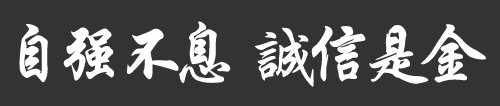
<style>
.page{position:relative;width:500px;height:106px;background:#333333}
.page>*{position:absolute;margin:0}
.t1{font:69.6px "FZXKFW--GB1-0";letter-spacing:-0.213em;color:#ffffff;font-weight:bold}
</style>
<div class="page">
<p class="t1" style="left:19px;top:21px;width:467px;height:66px">自强不息   诚信是金</p>
</div>
